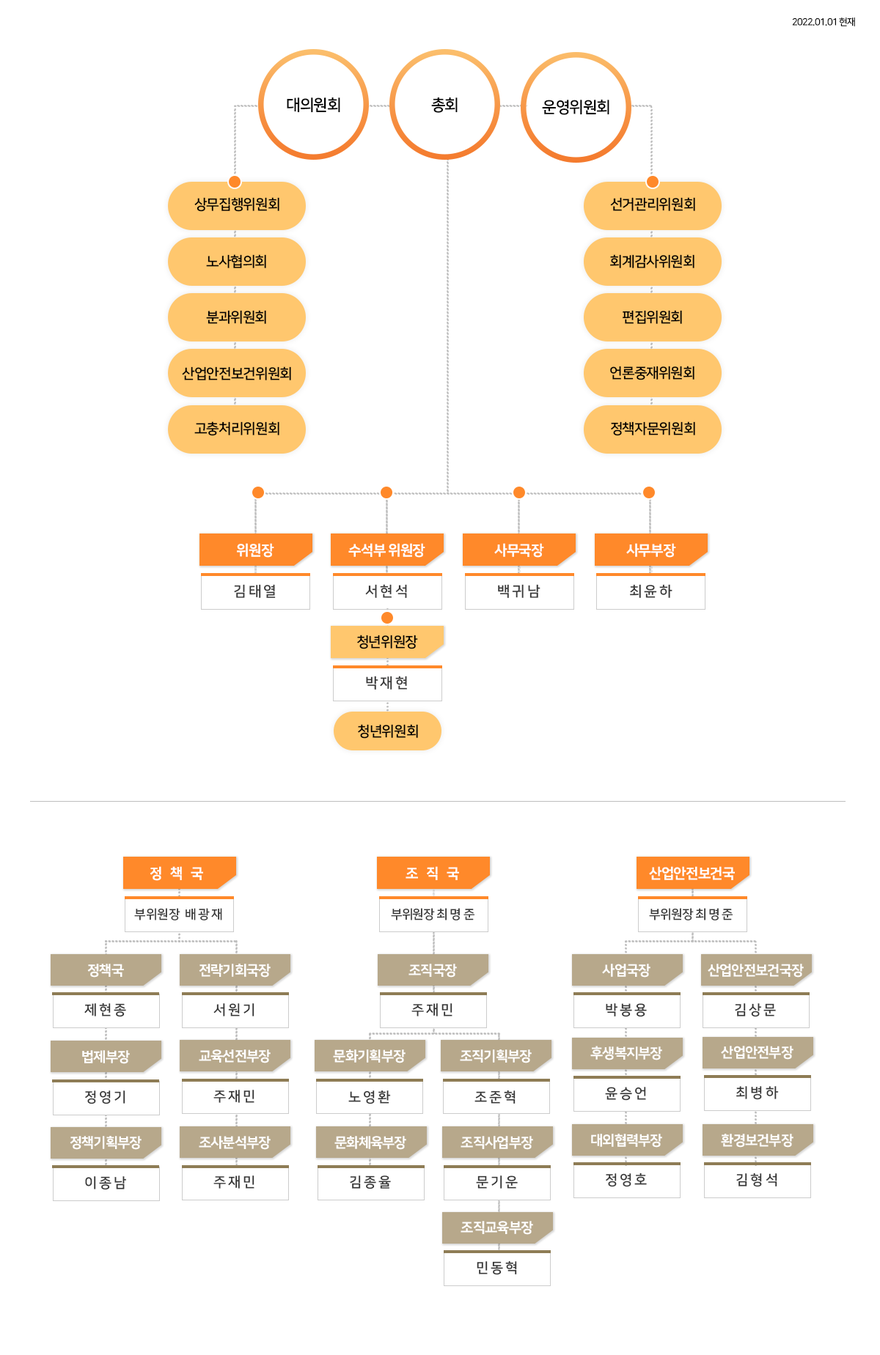
<style>
.page{position:relative;width:880px;height:1355px;background:#ffffff}
.page>*{position:absolute;margin:0}
.t1{font:9.4px "NanumSquareOTFR";letter-spacing:-0.05em;color:#000000}
.t2{font:15.7px "NanumSquareOTFB";letter-spacing:-0.05em;color:#000000}
.t3{font:14.2px "NanumSquareOTFB";letter-spacing:-0.05em;color:#000000}
.t4{font:14.2px "NanumSquareOTFEB";letter-spacing:-0.05em;color:#ffffff}
.t5{font:14.2px "NanumSquareOTFB";letter-spacing:0.15em;color:#373737}
.t6{font:14.2px "NanumSquareOTFEB";letter-spacing:0.53em;color:#ffffff}
.t7{font:12.6px "NanumSquareOTFB";letter-spacing:-0.01em;color:#373737}
.t8{font:12.6px "NanumSquareOTFB";letter-spacing:0.15em;color:#373737}
.t9{font:12.6px "NanumSquareOTFB";letter-spacing:-0.05em;color:#373737}
.t10{font:13.9px "NanumSquareOTFEB";letter-spacing:-0.05em;color:#ffffff}
.t11{font:13.9px "NanumSquareOTFB";letter-spacing:0.15em;color:#373737}
</style>
<div class="page">
<p class="t1" style="left:792px;top:17px;width:63px;height:9px">2022.01.01 현재</p>
<p class="t2" style="left:287px;top:97px;width:53px;height:16px">대의원회</p>
<p class="t2" style="left:431px;top:97px;width:26px;height:16px">총회</p>
<p class="t2" style="left:542px;top:99px;width:67px;height:16px">운영위원회</p>
<p class="t3" style="left:194px;top:197px;width:85px;height:15px">상무집행위원회</p>
<p class="t3" style="left:610px;top:197px;width:85px;height:14px">선거관리위원회</p>
<p class="t3" style="left:206px;top:254px;width:60px;height:14px">노사협의회</p>
<p class="t3" style="left:610px;top:254px;width:84px;height:14px">회계감사위원회</p>
<p class="t3" style="left:206px;top:310px;width:60px;height:14px">분과위원회</p>
<p class="t3" style="left:622px;top:310px;width:60px;height:14px">편집위원회</p>
<p class="t3" style="left:610px;top:366px;width:84px;height:14px">언론중재위원회</p>
<p class="t3" style="left:182px;top:367px;width:109px;height:13px">산업안전보건위원회</p>
<p class="t3" style="left:194px;top:422px;width:85px;height:14px">고충처리위원회</p>
<p class="t3" style="left:611px;top:422px;width:84px;height:14px">정책자문위원회</p>
<p class="t4" style="left:237px;top:543px;width:37px;height:15px">위원장</p>
<p class="t4" style="left:348px;top:543px;width:77px;height:15px">수석부 위원장</p>
<p class="t4" style="left:494px;top:543px;width:50px;height:15px">사무국장</p>
<p class="t4" style="left:626px;top:543px;width:50px;height:15px">사무부장</p>
<p class="t5" style="left:234px;top:584px;width:42px;height:14px">김태열</p>
<p class="t5" style="left:365px;top:584px;width:42px;height:14px">서현석</p>
<p class="t5" style="left:498px;top:584px;width:42px;height:14px">백귀남</p>
<p class="t5" style="left:630px;top:584px;width:42px;height:14px">최윤하</p>
<p class="t3" style="left:357px;top:635px;width:61px;height:15px">청년위원장</p>
<p class="t5" style="left:366px;top:676px;width:41px;height:14px">박재현</p>
<p class="t3" style="left:358px;top:724px;width:60px;height:15px">청년위원회</p>
<p class="t6" style="left:150px;top:867px;width:53px;height:14px">정책국</p>
<p class="t6" style="left:405px;top:867px;width:54px;height:13px">조직국</p>
<p class="t4" style="left:649px;top:867px;width:86px;height:13px">산업안전보건국</p>
<p class="t7" style="left:134px;top:908px;width:88px;height:13px">부위원장<span class="t8"> 배광재</span></p>
<p class="t9" style="left:391px;top:908px;width:83px;height:13px">부위원장 <span class="t8">최명준</span></p>
<p class="t9" style="left:649px;top:908px;width:83px;height:13px">부위원장 <span class="t8">최명준</span></p>
<p class="t10" style="left:87px;top:964px;width:37px;height:14px">정책국</p>
<p class="t10" style="left:199px;top:964px;width:72px;height:14px">전략기회국장</p>
<p class="t10" style="left:408px;top:964px;width:49px;height:14px">조직국장</p>
<p class="t10" style="left:602px;top:964px;width:48px;height:14px">사업국장</p>
<p class="t10" style="left:707px;top:964px;width:96px;height:14px">산업안전보건국장</p>
<p class="t11" style="left:84px;top:1003px;width:42px;height:15px">제현종</p>
<p class="t11" style="left:213px;top:1004px;width:41px;height:13px">서원기</p>
<p class="t11" style="left:411px;top:1004px;width:41px;height:13px">주재민</p>
<p class="t11" style="left:606px;top:1004px;width:41px;height:14px">박봉용</p>
<p class="t11" style="left:735px;top:1004px;width:41px;height:14px">김상문</p>
<p class="t10" style="left:199px;top:1050px;width:72px;height:14px">교육선전부장</p>
<p class="t10" style="left:333px;top:1050px;width:72px;height:14px">문화기획부장</p>
<p class="t10" style="left:460px;top:1050px;width:71px;height:14px">조직기획부장</p>
<p class="t10" style="left:590px;top:1046px;width:72px;height:15px">후생복지부장</p>
<p class="t10" style="left:721px;top:1046px;width:72px;height:14px">산업안전부장</p>
<p class="t10" style="left:82px;top:1051px;width:48px;height:13px">법제부장</p>
<p class="t11" style="left:85px;top:1091px;width:40px;height:14px">정영기</p>
<p class="t11" style="left:213px;top:1090px;width:41px;height:13px">주재민</p>
<p class="t11" style="left:348px;top:1091px;width:43px;height:14px">노영환</p>
<p class="t11" style="left:474px;top:1090px;width:41px;height:14px">조준혁</p>
<p class="t11" style="left:605px;top:1087px;width:41px;height:14px">윤승언</p>
<p class="t11" style="left:736px;top:1086px;width:43px;height:14px">최병하</p>
<p class="t10" style="left:70px;top:1136px;width:71px;height:14px">정책기획부장</p>
<p class="t10" style="left:199px;top:1136px;width:72px;height:14px">조사분석부장</p>
<p class="t10" style="left:334px;top:1136px;width:72px;height:14px">문화체육부장</p>
<p class="t10" style="left:460px;top:1136px;width:73px;height:14px">조직사업부장</p>
<p class="t10" style="left:591px;top:1134px;width:71px;height:14px">대외협력부장</p>
<p class="t10" style="left:721px;top:1134px;width:72px;height:14px">환경보건부장</p>
<p class="t11" style="left:85px;top:1177px;width:41px;height:14px">이종남</p>
<p class="t11" style="left:213px;top:1176px;width:41px;height:13px">주재민</p>
<p class="t11" style="left:350px;top:1176px;width:41px;height:14px">김종율</p>
<p class="t11" style="left:476px;top:1176px;width:42px;height:13px">문기운</p>
<p class="t11" style="left:606px;top:1173px;width:41px;height:15px">정영호</p>
<p class="t11" style="left:736px;top:1173px;width:41px;height:15px">김형석</p>
<p class="t10" style="left:460px;top:1221px;width:73px;height:14px">조직교육부장</p>
<p class="t11" style="left:477px;top:1261px;width:40px;height:15px">민동혁</p>
</div>
